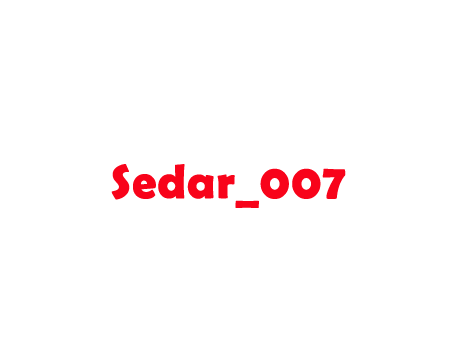
<style>
.page{position:relative;width:454px;height:340px;background:#ffffff}
.page>*{position:absolute;margin:0}
.t1{font:48px "BerlinSansFBDemi-Bold";color:#f8031a;font-weight:bold}
</style>
<div class="page">
<p class="t1" style="left:111px;top:164px;width:235px;height:44px">Sedar_007</p>
</div>
